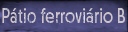
<style>
.page{position:relative;width:128px;height:32px}
.page>*{position:absolute;margin:0}
.t1{font:15.4px "Otterco-Regular";letter-spacing:0.02em;color:#cdc3cb;scale:0.76 1}
</style>
<div class="page">
<p class="t1" style="left:2px;top:8px;width:123px;height:15px">Pátio ferroviário B</p>
</div>
